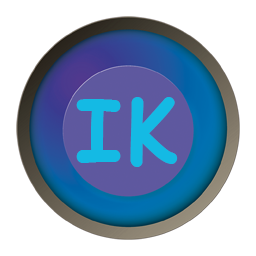
<style>
.page{position:relative;width:256px;height:256px;background:#ffffff}
.page>*{position:absolute;margin:0}
.t1{font:86.4px "ComicSansMS-Bold";letter-spacing:0.05em;color:#14bae4}
</style>
<div class="page">
<p class="t1" style="left:76px;top:97px;width:102px;height:70px">IK</p>
</div>
